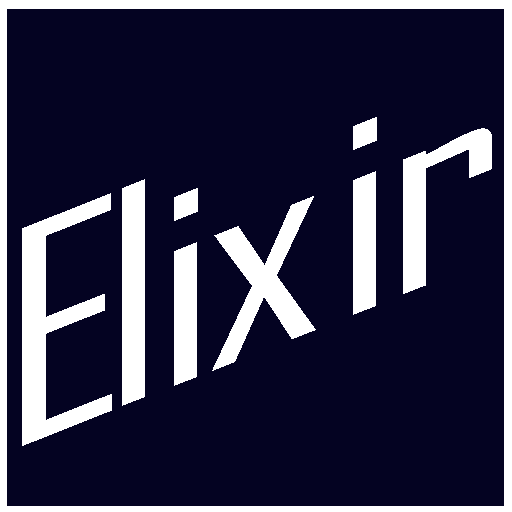
<style>
.page{position:relative;width:512px;height:512px;background:#040322}
.page>*{position:absolute;margin:0}
.t1{font:285.4px "AgencyFB-Reg";color:#ffffff;scale:1.35 1}
</style>
<div class="page">
<p class="t1" style="left:22px;top:117px;width:470px;height:329px;rotate:-22deg">Elixir</p>
</div>
